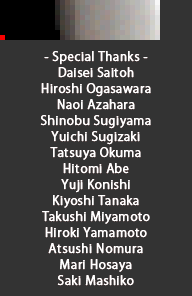
<style>
.page{position:relative;width:192px;height:296px;background:#333333}
.page>*{position:absolute;margin:0}
.t1{font:12px/16px "KozGoPr6N-Regular";letter-spacing:0.025em;color:#ffffff;font-weight:bold}
</style>
<div class="page">
<p class="t1" style="left:40px;top:51px;width:111px;height:235px;text-align:center">- Special Thanks -<br>Daisei Saitoh<br>Hiroshi Ogasawara<br>Naoi Azahara<br>Shinobu Sugiyama<br>Yuichi Sugizaki<br>Tatsuya Okuma<br>Hitomi Abe<br>Yuji Konishi<br>Kiyoshi Tanaka<br>Takushi Miyamoto<br>Hiroki Yamamoto<br>Atsushi Nomura<br>Mari Hosaya<br>Saki Mashiko</p>
</div>
